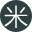
<style>
.page{position:relative;width:32px;height:32px;background:#304040}
.page>*{position:absolute;margin:0}
.t1{font:24px "MicrosoftYaHeiLight";color:#ffffff}
</style>
<div class="page">
<p class="t1" style="left:4px;top:5px;width:24px;height:23px">米</p>
</div>
